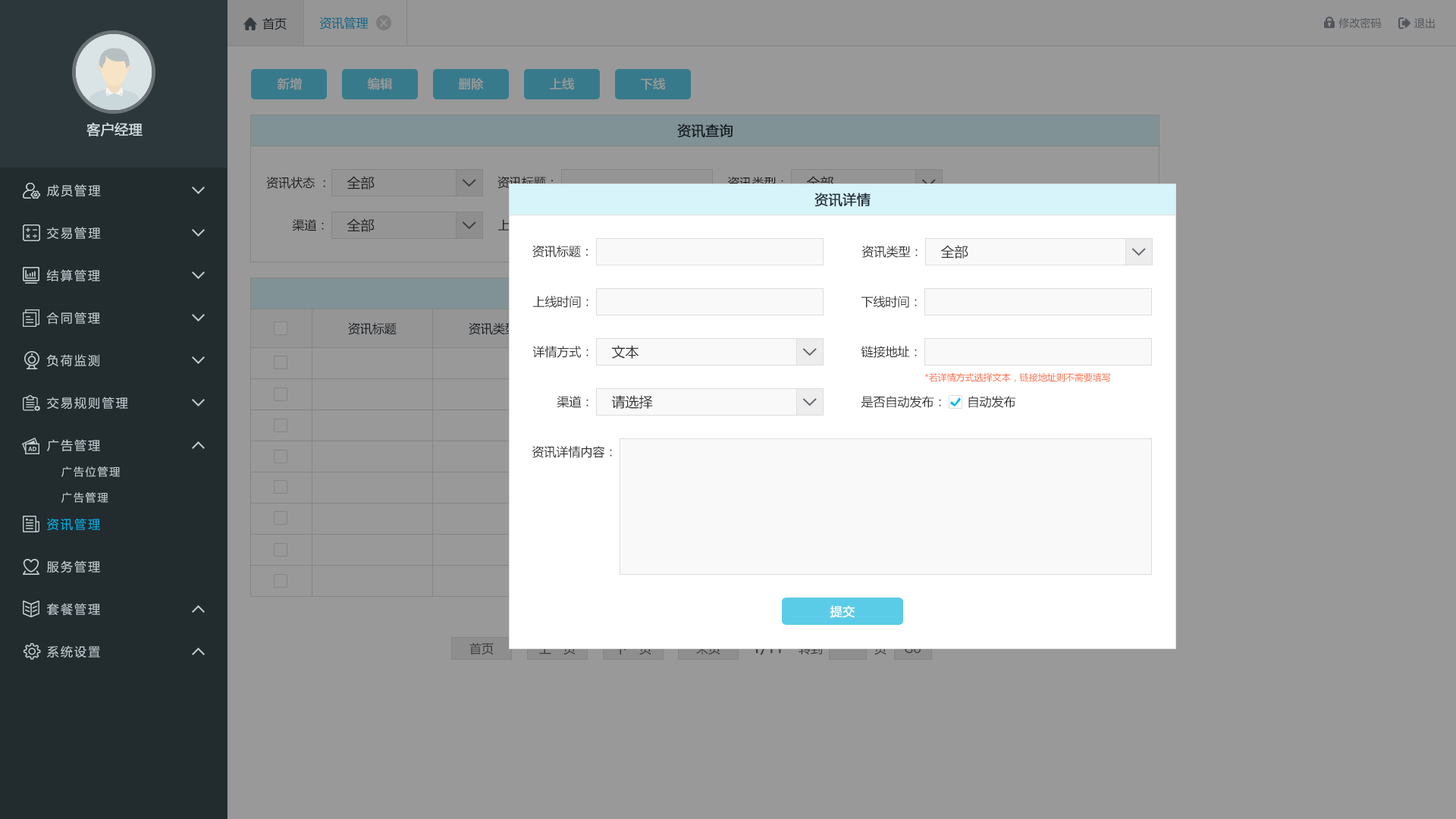
<style>
.page{position:relative;width:1456px;height:819px;background:#999999}
.page>*{position:absolute;margin:0}
.t1{font:12.1px "MicrosoftYaHei";color:#242e3b}
.t2{font:12.1px "MicrosoftYaHei";color:#006788}
.t3{font:10.6px "MicrosoftYaHei";color:#53565c}
.t4{font:12.1px "MicrosoftYaHei";color:#999999;font-weight:bold}
.t5{font:13.6px "MicrosoftYaHei";color:#d1dce2;font-weight:bold}
.t6{font:13.6px "MicrosoftYaHei";color:#242e3b;font-weight:bold}
.t7{font:12.1px "MicrosoftYaHei";letter-spacing:0.14em;color:#c2cdd2}
.t8{font:12.1px "MicrosoftYaHei";color:#333333}
.t9{font:13.6px "MicrosoftYaHei";color:#333333}
.t10{font:13.6px "MicrosoftYaHei"}
.t11{font:9.1px "MicrosoftYaHei";color:#f66f45}
.t12{font:10.6px "MicrosoftYaHei";letter-spacing:0.14em;color:#c2cdd2}
.t13{font:12.1px "MicrosoftYaHei";letter-spacing:0.14em;color:#00ace2}
.t14{font:12.1px "MicrosoftYaHei";color:#ffffff;font-weight:bold}
.t15{font:12.1px "MicrosoftYaHei";color:#3a3d40}
</style>
<div class="page">
<p class="t1" style="left:262px;top:17px;width:25px;height:13px">首页</p>
<p class="t2" style="left:319px;top:17px;width:50px;height:13px">资讯管理</p>
<p class="t3" style="left:1338px;top:17px;width:43px;height:12px">修改密码</p>
<p class="t3" style="left:1414px;top:17px;width:21px;height:11px">退出</p>
<p class="t4" style="left:277px;top:77px;width:25px;height:13px">新增</p>
<p class="t4" style="left:367px;top:77px;width:26px;height:13px">编辑</p>
<p class="t4" style="left:458px;top:77px;width:26px;height:13px">删除</p>
<p class="t4" style="left:550px;top:77px;width:25px;height:13px">上线</p>
<p class="t4" style="left:641px;top:77px;width:25px;height:13px">下线</p>
<p class="t5" style="left:86px;top:122px;width:57px;height:14px">客户经理</p>
<p class="t6" style="left:677px;top:124px;width:56px;height:14px">资讯查询</p>
<p class="t7" style="left:47px;top:184px;width:54px;height:13px">成员管理</p>
<p class="t8" style="left:266px;top:177px;width:59px;height:12px">资讯状态 ：</p>
<p class="t9" style="left:347px;top:176px;width:28px;height:14px">全部</p>
<p class="t8" style="left:497px;top:176px;width:56px;height:13px">资讯标题：</p>
<p class="t8" style="left:727px;top:177px;width:56px;height:12px">资讯类型：</p>
<p class="t10" style="left:806px;top:176px;width:28px;height:14px">全部</p>
<p class="t6" style="left:814px;top:193px;width:57px;height:14px">资讯详情</p>
<p class="t8" style="left:292px;top:219px;width:32px;height:12px">渠道：</p>
<p class="t9" style="left:347px;top:218px;width:28px;height:14px">全部</p>
<p class="t7" style="left:47px;top:227px;width:54px;height:13px">交易管理</p>
<p class="t8" style="left:532px;top:245px;width:56px;height:13px">资讯标题：</p>
<p class="t8" style="left:861px;top:246px;width:57px;height:12px">资讯类型：</p>
<p class="t9" style="left:940px;top:245px;width:28px;height:14px">全部</p>
<p class="t7" style="left:46px;top:269px;width:54px;height:13px">结算管理</p>
<p class="t8" style="left:533px;top:296px;width:55px;height:12px">上线时间：</p>
<p class="t8" style="left:861px;top:296px;width:56px;height:12px">下线时间：</p>
<p class="t7" style="left:46px;top:312px;width:54px;height:13px">合同管理</p>
<p class="t1" style="left:348px;top:322px;width:49px;height:13px">资讯标题</p>
<p class="t1" style="left:469px;top:322px;width:48px;height:13px">资讯类型</p>
<p class="t8" style="left:532px;top:346px;width:56px;height:12px">详情方式：</p>
<p class="t9" style="left:612px;top:345px;width:27px;height:14px">文本</p>
<p class="t8" style="left:861px;top:346px;width:56px;height:12px">链接地址：</p>
<p class="t7" style="left:46px;top:354px;width:53px;height:13px">负荷监测</p>
<p class="t11" style="left:924px;top:373px;width:186px;height:9px">*若详情方式选择文本，链接地址则不需要填写</p>
<p class="t7" style="left:47px;top:397px;width:81px;height:12px">交易规则管理</p>
<p class="t8" style="left:557px;top:396px;width:31px;height:12px">渠道：</p>
<p class="t9" style="left:611px;top:395px;width:42px;height:14px">请选择</p>
<p class="t8" style="left:861px;top:396px;width:80px;height:12px">是否自动发布：</p>
<p class="t8" style="left:968px;top:396px;width:48px;height:12px">自动发布</p>
<p class="t7" style="left:47px;top:439px;width:53px;height:12px">广告管理</p>
<p class="t8" style="left:532px;top:446px;width:80px;height:12px">资讯详情内容：</p>
<p class="t12" style="left:61px;top:466px;width:59px;height:11px">广告位管理</p>
<p class="t12" style="left:61px;top:492px;width:47px;height:11px">广告管理</p>
<p class="t13" style="left:47px;top:518px;width:53px;height:13px">资讯管理</p>
<p class="t7" style="left:47px;top:560px;width:53px;height:13px">服务管理</p>
<p class="t7" style="left:47px;top:603px;width:53px;height:13px">套餐管理</p>
<p class="t14" style="left:830px;top:605px;width:25px;height:13px">提交</p>
<p class="t7" style="left:47px;top:645px;width:53px;height:13px">系统设置</p>
<p class="t15" style="left:469px;top:642px;width:25px;height:13px">首页</p>
</div>
